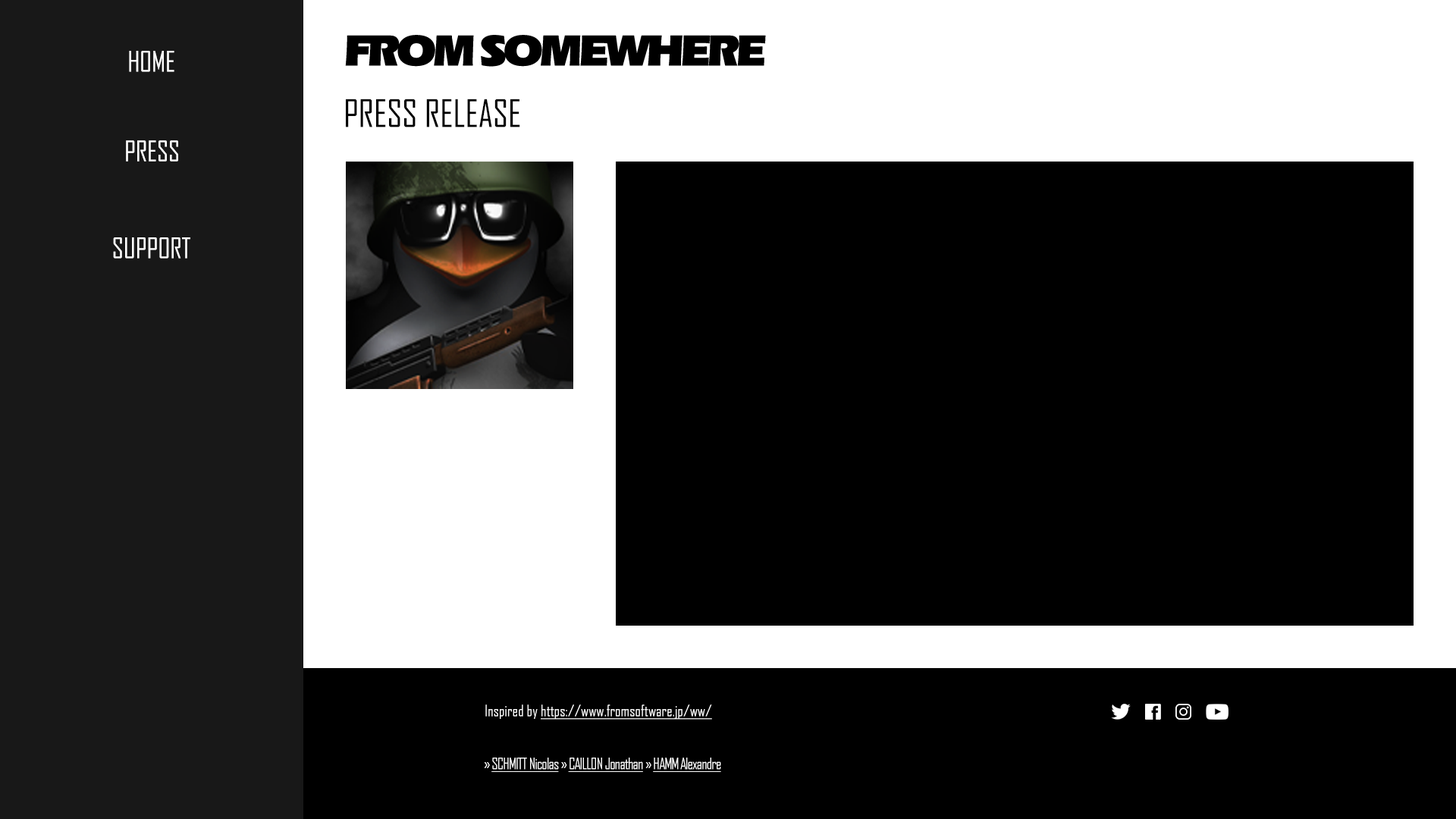
<style>
.page{position:relative;width:1456px;height:819px;background:#000000}
.page>*{position:absolute;margin:0}
.t1{font:45.5px "ErasITCbyBT-Ultra";letter-spacing:-0.075em;color:#000000}
.t2{font:27.3px "AgencyFB-Reg";color:#ffffff}
.t3{font:36.4px "AgencyFB-Reg";color:#000000}
.t4{font:15.2px "AgencyFB-Reg";color:#ffffff;text-decoration:underline}
.t5{font:15.2px "AgencyFB-Reg";color:#ffffff}
.t6{font:15.2px "AgencyFB-Reg";letter-spacing:-0.05em;color:#ffffff;text-decoration:underline}
.t7{font:15.2px "AgencyFB-Reg";letter-spacing:-0.05em;color:#ffffff}
</style>
<div class="page">
<p class="t1" style="left:345px;top:35px;width:129px;height:32px">FROM</p>
<p class="t1" style="left:481px;top:35px;width:285px;height:32px">SOMEWHERE</p>
<p class="t2" style="left:129px;top:51px;width:45px;height:21px">HOME</p>
<p class="t3" style="left:346px;top:99px;width:174px;height:28px">PRESS RELEASE</p>
<p class="t2" style="left:126px;top:140px;width:52px;height:22px">PRESS</p>
<p class="t2" style="left:113px;top:237px;width:77px;height:22px">SUPPORT</p>
<p class="t4" style="left:485px;top:704px;width:227px;height:16px"><span class="t5">Inspired by </span>https://www.fromsoftware.jp/ww/</p>
<p class="t6" style="left:484px;top:758px;width:237px;height:14px"><span class="t7">» </span>SCHMITT Nicolas<span class="t7"> » </span>CAILLON Jonathan<span class="t7"> » </span>HAMM Alexandre</p>
</div>
